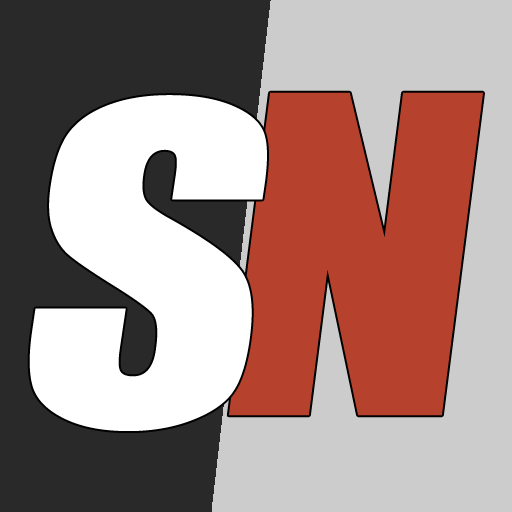
<style>
.page{position:relative;width:512px;height:512px;background:#cccccc}
.page>*{position:absolute;margin:0}
.t1{font:412.1px "Impact";color:#ffffff;scale:1.14 1}
.t2{font:411px "Impact";color:#b6422e;scale:1.13 1}
</style>
<div class="page">
<p class="t1" style="left:29px;top:95px;width:238px;height:336px">S</p>
<p class="t2" style="left:228px;top:92px;width:255px;height:324px">N</p>
</div>
